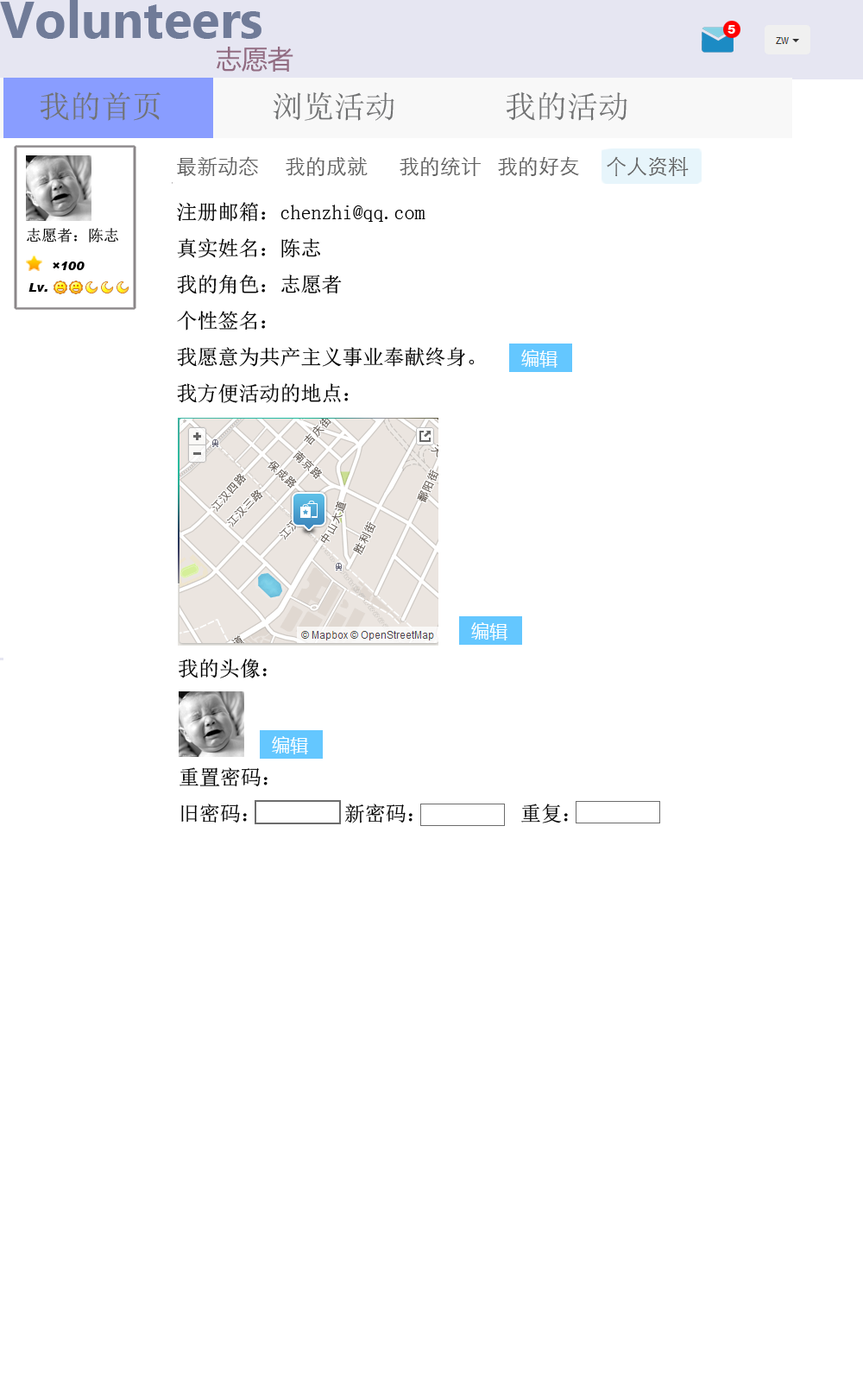
<style>
.page{position:relative;width:863px;height:1381px;background:#ffffff}
.page>*{position:absolute;margin:0}
.t1{font:12.1px "Arial-Black";color:#ffffff}
.t2{font:31.1px "SimSun";color:#717273}
.t3{font:20.7px "STXihei";color:#626262}
.t4{font:20.7px "SimSun";color:#000000}
.t5{font:15.5px "SimSun";color:#000000}
.t6{font:12.1px "Arial-BlackItalic";color:#000000}
</style>
<div class="page">
<p class="t1" style="left:728px;top:25px;width:8px;height:9px">5</p>
<p class="t2" style="left:40px;top:92px;width:588px;height:29px">我的首页       浏览活动       我的活动</p>
<p class="t3" style="left:177px;top:156px;width:512px;height:21px">最新动态     我的成就      我的统计   我的好友     个人资料</p>
<p class="t4" style="left:177px;top:202px;width:298px;height:201px">注册邮箱：chenzhi@qq.com<br>真实姓名：陈志<br>我的角色：志愿者<br>个性签名：<br>我愿意为共产主义事业奉献终身。<br>我方便活动的地点：</p>
<p class="t5" style="left:27px;top:228px;width:91px;height:15px">志愿者：陈志</p>
<p class="t6" style="left:53px;top:262px;width:32px;height:8px">×100</p>
<p class="t6" style="left:28px;top:283px;width:19px;height:9px">Lv.</p>
<p class="t4" style="left:179px;top:659px;width:88px;height:20px">我的头像：</p>
<p class="t4" style="left:180px;top:767px;width:388px;height:57px">重置密码：<br>旧密码：        新密码：         重复：</p>
</div>
